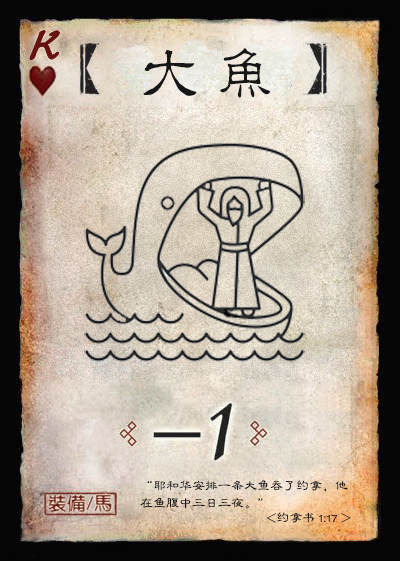
<style>
.page{position:relative;width:400px;height:561px}
.page>*{position:absolute;margin:0}
.t1{font:50px "Jxixinkai";color:#661213;font-weight:bold;font-style:italic}
.t2{font:60px "¾­µä·±½ÇÁ¥ Regular";letter-spacing:0.25em;color:#161616}
.t3{font:13px/17.5px "FZLBJW--GB1-0";color:#161616}
.t4{font:13px "FZLBJW--GB1-0";color:#161616}
</style>
<div class="page">
<p class="t1" style="left:30px;top:30px;width:30px;height:30px">K</p>
<p class="t2" style="left:143px;top:48px;width:127px;height:50px">大鱼</p>
<p class="t3" style="left:140px;top:480px;width:208px;height:29px">“耶和华安排一条大鱼吞了约拿，他<br>在鱼腹中三日三夜。”</p>
<p class="t4" style="left:266px;top:512px;width:85px;height:11px">&lt;约拿书 1:17 &gt;</p>
</div>
